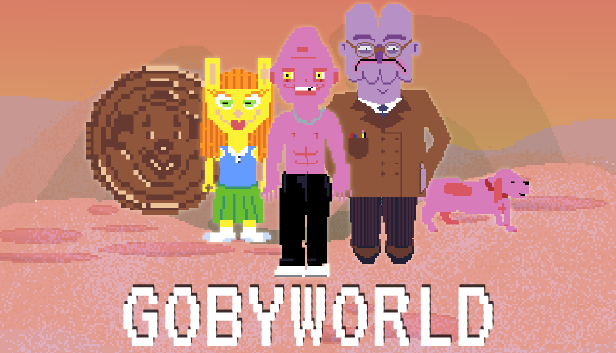
<style>
.page{position:relative;width:616px;height:353px}
.page>*{position:absolute;margin:0}
.t1{font:104.7px "VT323-Regular";color:#ffffff}
</style>
<div class="page">
<p class="t1" style="left:123px;top:287px;width:370px;height:59px">GOBYWORLD</p>
</div>
